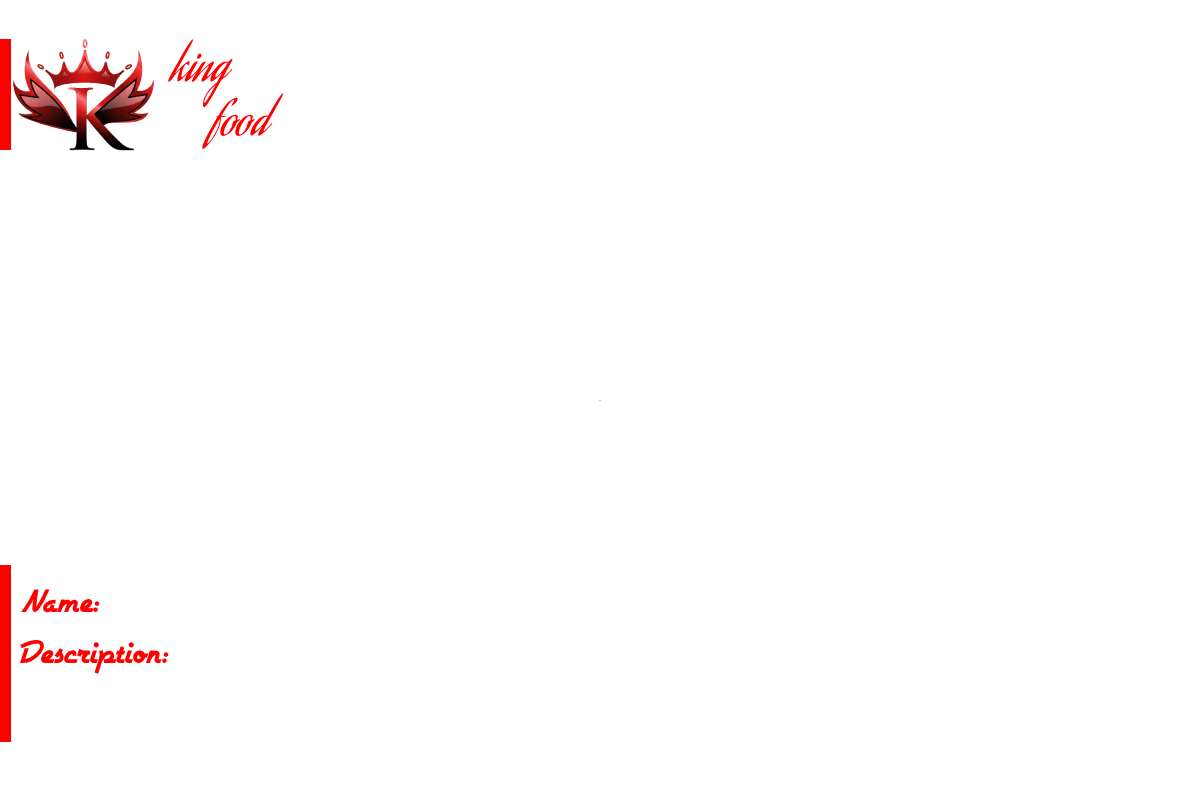
<style>
.page{position:relative;width:1200px;height:800px;background:#ffffff}
.page>*{position:absolute;margin:0}
.t1{font:45px "AguafinaScript-Regular";color:#ff0000}
.t2{font:38px "Airstream";color:#ff0000}
</style>
<div class="page">
<p class="t1" style="left:168px;top:39px;width:116px;height:110px">king <br>     food</p>
<p class="t2" style="left:21px;top:589px;width:79px;height:24px">Name:</p>
<p class="t2" style="left:20px;top:639px;width:149px;height:35px">Description:</p>
</div>
